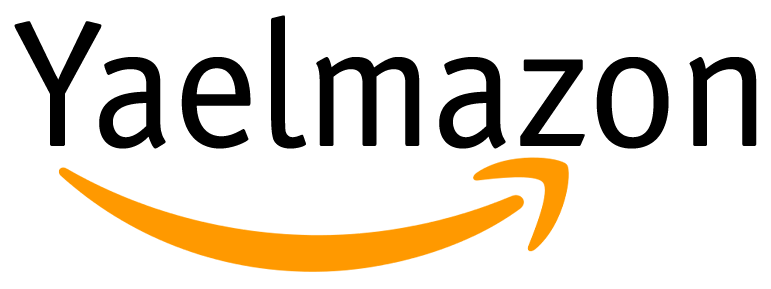
<style>
.page{position:relative;width:771px;height:289px;background:#ffffff}
.page>*{position:absolute;margin:0}
.t1{font:180px "OfficinaSansStd-Book";color:#000000}
</style>
<div class="page">
<p class="t1" style="left:14px;top:15px;width:743px;height:134px">Yaelmazon</p>
</div>
